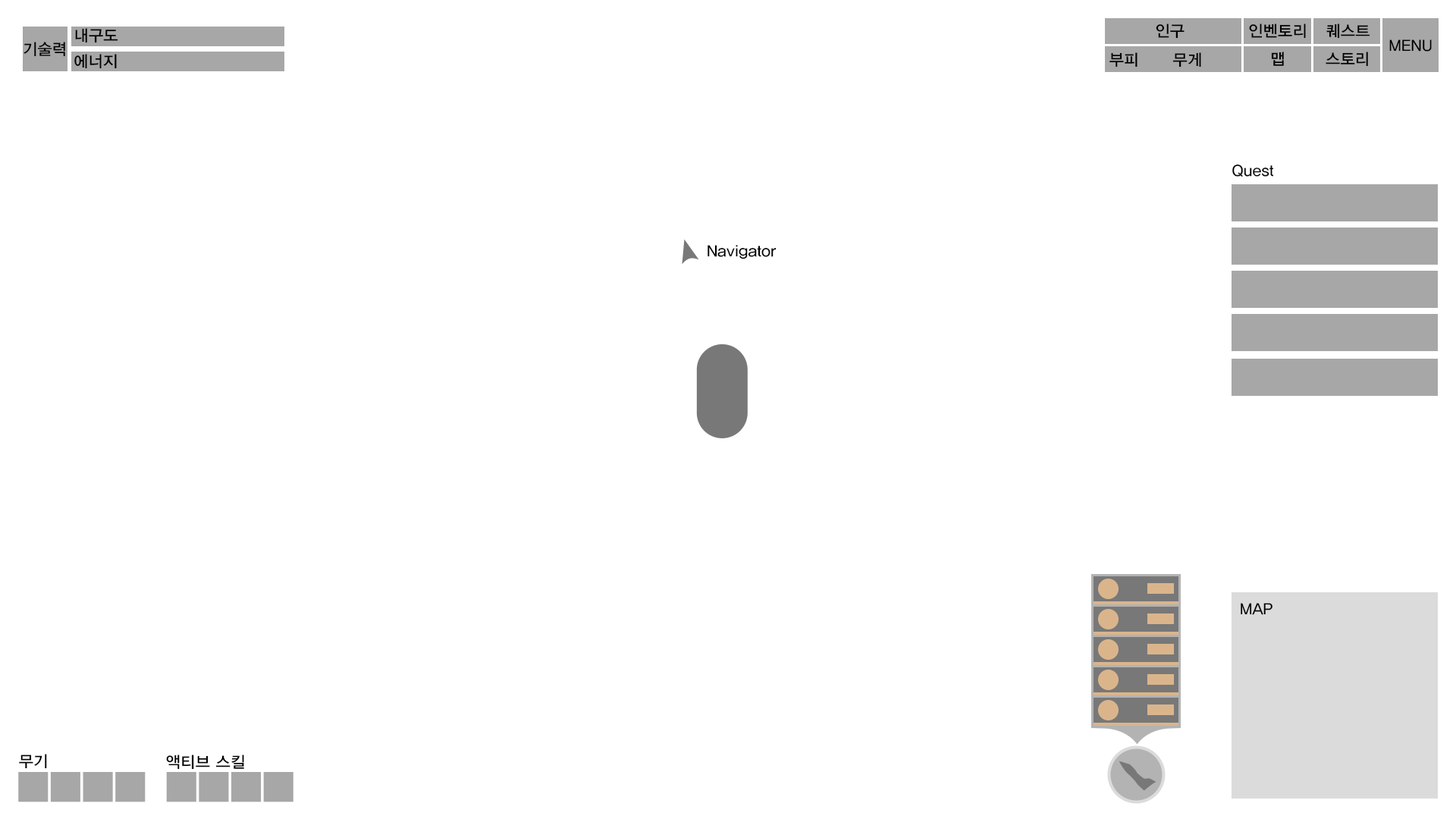
<style>
.page{position:relative;width:1456px;height:819px;background:#ffffff}
.page>*{position:absolute;margin:0}
.t1{font:15.8px "YDIYGO330";letter-spacing:0.01em;color:#000000}
.t2{font:15.8px "YDIYGO330";letter-spacing:0.01em;color:#010101}
</style>
<div class="page">
<p class="t1" style="left:75px;top:28px;width:43px;height:15px">내구도</p>
<p class="t1" style="left:1156px;top:24px;width:29px;height:15px">인구</p>
<p class="t1" style="left:1249px;top:24px;width:57px;height:15px">인벤토리</p>
<p class="t1" style="left:1326px;top:24px;width:44px;height:15px">퀘스트</p>
<p class="t2" style="left:24px;top:42px;width:41px;height:15px">기술력</p>
<p class="t1" style="left:1389px;top:39px;width:43px;height:13px">MENU</p>
<p class="t1" style="left:74px;top:54px;width:43px;height:15px">에너지</p>
<p class="t1" style="left:1109px;top:52px;width:92px;height:15px">부피      무게</p>
<p class="t1" style="left:1271px;top:52px;width:13px;height:14px">맵</p>
<p class="t1" style="left:1326px;top:52px;width:42px;height:15px">스토리</p>
<p class="t1" style="left:1232px;top:164px;width:42px;height:13px">Quest</p>
<p class="t1" style="left:708px;top:245px;width:69px;height:14px">Navigator</p>
<p class="t1" style="left:1241px;top:603px;width:31px;height:12px">MAP</p>
<p class="t1" style="left:19px;top:754px;width:28px;height:15px">무기</p>
<p class="t1" style="left:166px;top:755px;width:78px;height:15px">액티브 스킬</p>
</div>
